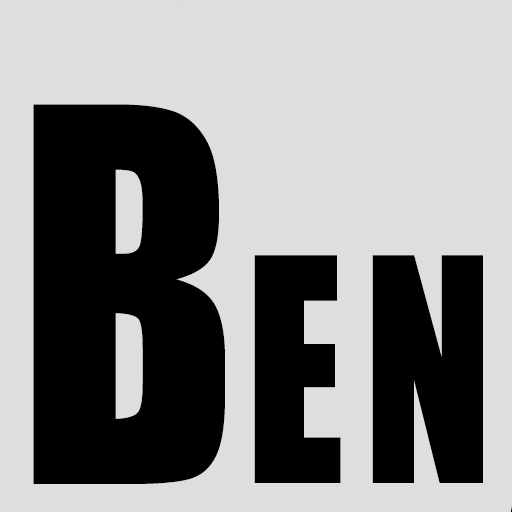
<style>
.page{position:relative;width:512px;height:512px;background:#dedede}
.page>*{position:absolute;margin:0}
.t1{font:480px "Impact";letter-spacing:0.03em;color:#000000;scale:0.83 1}
.t2{font:288px "Impact";letter-spacing:0.075em;color:#000000;scale:0.83 1}
</style>
<div class="page">
<p class="t1" style="left:33px;top:104px;width:192px;height:380px">B</p>
<p class="t2" style="left:254px;top:255px;width:229px;height:228px">EN</p>
</div>
